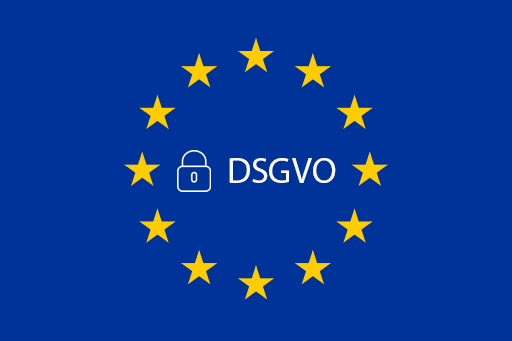
<style>
.page{position:relative;width:512px;height:341px;background:#003399}
.page>*{position:absolute;margin:0}
.t1{font:36px "MyriadPro-Regular";color:#ffffff}
</style>
<div class="page">
<p class="t1" style="left:229px;top:158px;width:107px;height:25px">DSGVO</p>
</div>
